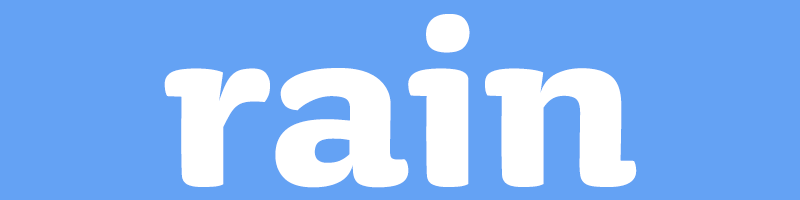
<style>
.page{position:relative;width:800px;height:200px;background:#64a2f4}
.page>*{position:absolute;margin:0}
.t1{font:281.6px "Sauna-Bold";color:#ffffff}
</style>
<div class="page">
<p class="t1" style="left:164px;top:14px;width:473px;height:174px">rain</p>
</div>
